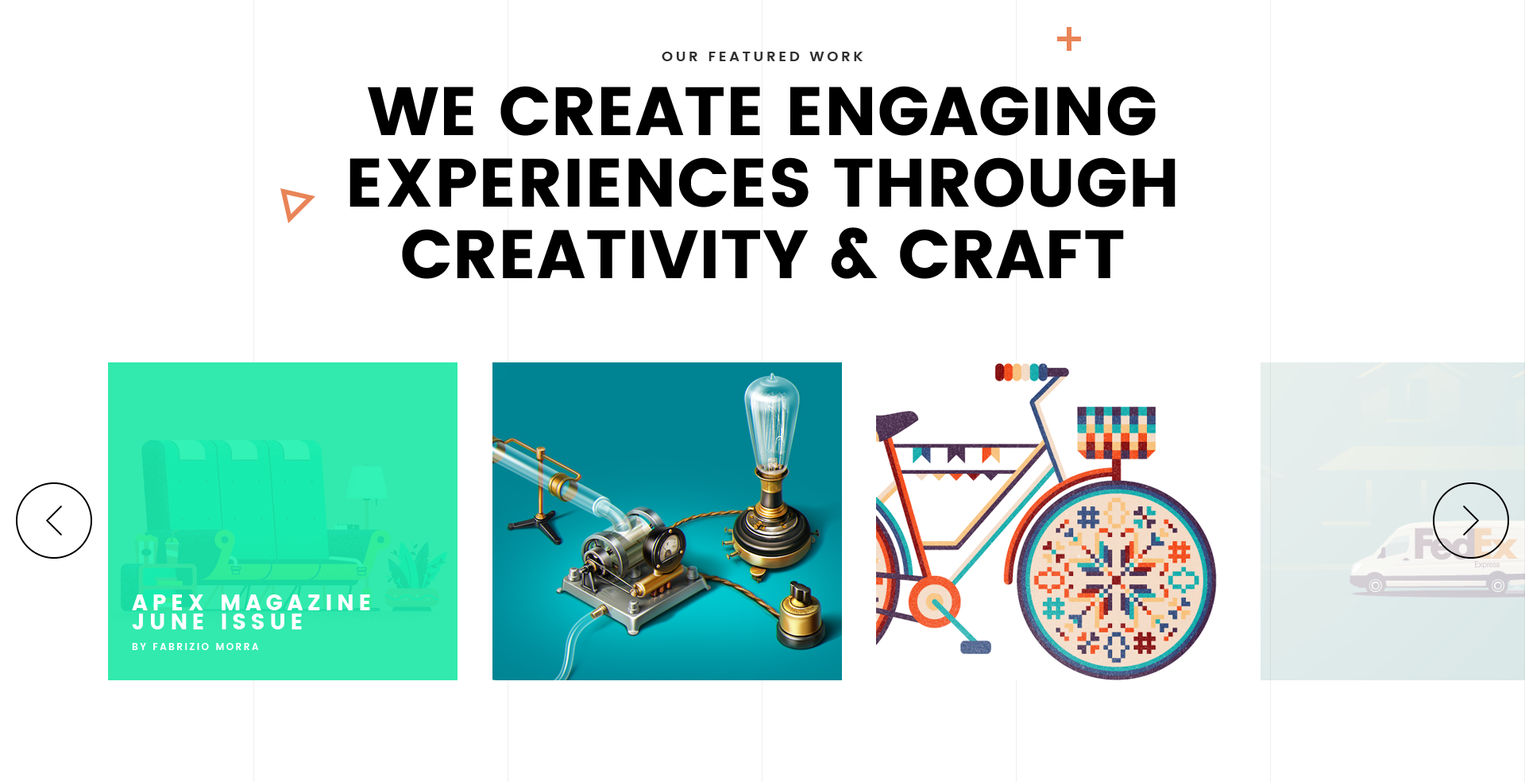
<style>
.page{position:relative;width:1525px;height:782px;background:#ffffff}
.page>*{position:absolute;margin:0}
.t1{font:14.3px "Poppins-SemiBold";letter-spacing:0.2em;color:#303030;text-transform:uppercase}
.t2{font:68.3px/71.5px "Poppins";color:#000000;text-transform:uppercase}
.t3{font:22.2px/19.1px "Poppins";letter-spacing:0.2em;color:#ffffff;text-transform:uppercase}
.t4{font:9.5px "Poppins-SemiBold";letter-spacing:0.2em;color:#ffffff;text-transform:uppercase}
</style>
<div class="page">
<p class="t1" style="left:662px;top:52px;width:201px;height:9px">our featured work</p>
<p class="t2" style="left:350px;top:86px;width:826px;height:193px;text-align:center">We create engaging<br>experiences through<br>creativity &amp; craft</p>
<p class="t3" style="left:132px;top:594px;width:238px;height:35px">Apex Magazine<br>June Issue</p>
<p class="t4" style="left:132px;top:643px;width:127px;height:7px">by Fabrizio Morra</p>
</div>
